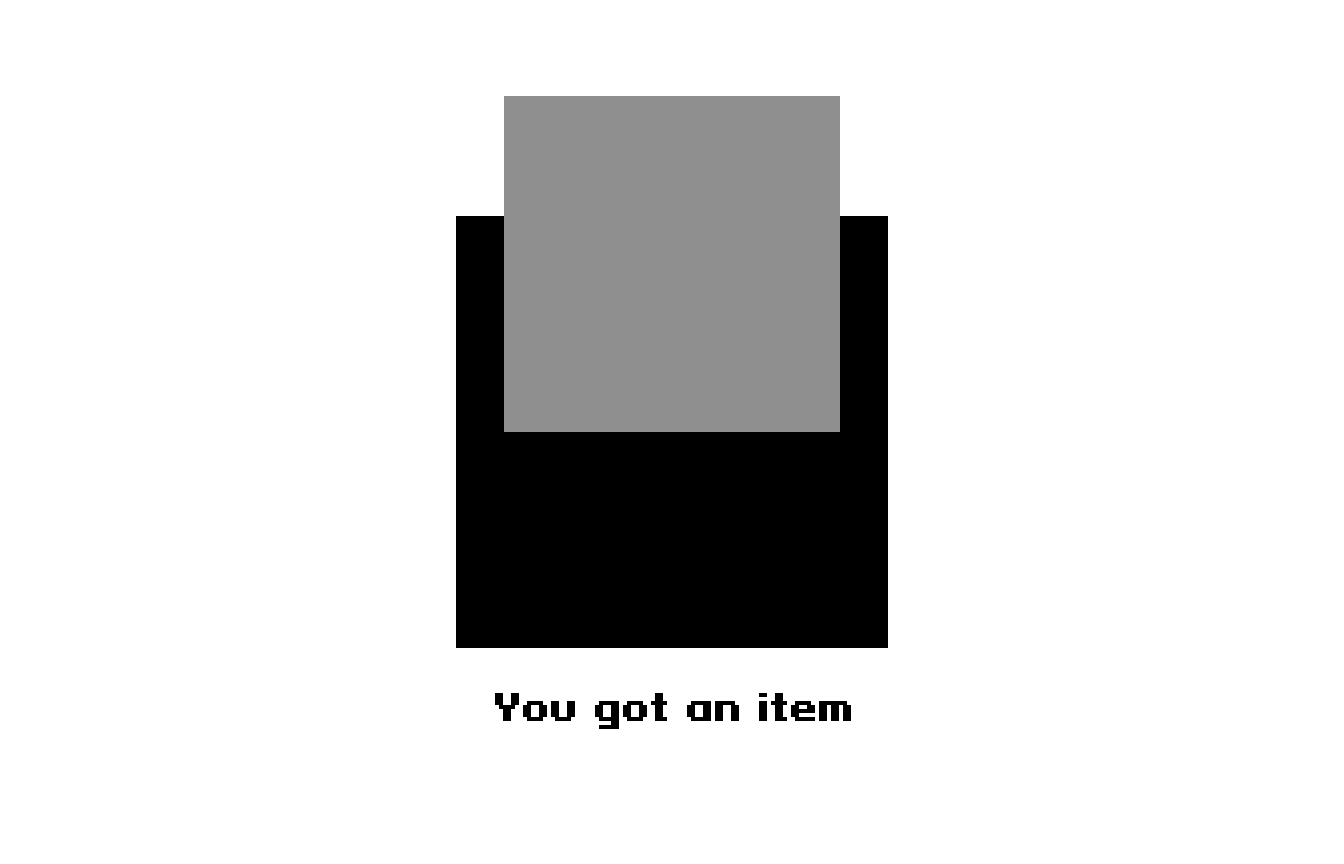
<style>
.page{position:relative;width:1344px;height:864px;background:#ffffff}
.page>*{position:absolute;margin:0}
.t1{font:36px "PixeloidSans-Bold";color:#000000}
</style>
<div class="page">
<p class="t1" style="left:495px;top:693px;width:356px;height:36px">You got an item</p>
</div>
